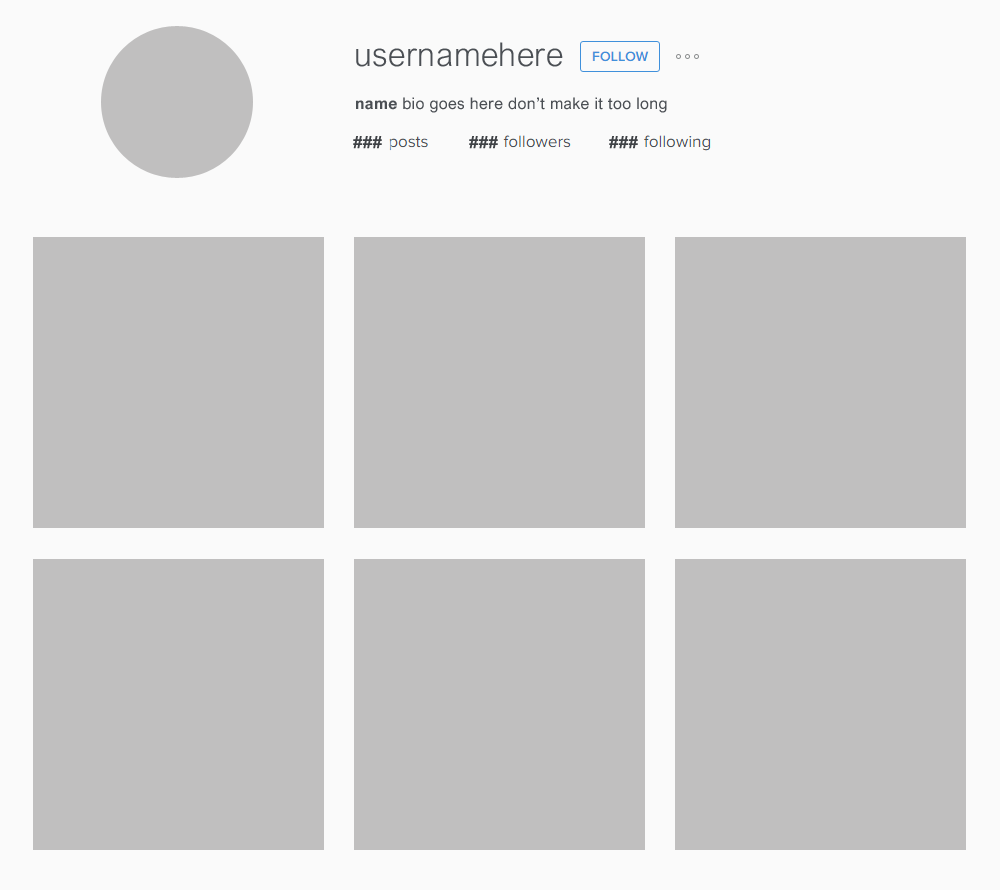
<style>
.page{position:relative;width:1000px;height:890px;background:#c0bfbf}
.page>*{position:absolute;margin:0}
.t1{font:33px "ArialNova-Light";letter-spacing:0.014em;color:#4b4f54}
.t2{font:16px "ArialNova";letter-spacing:0.02em;color:#4b4f54}
.t3{font:16px "ArialNova-Bold";letter-spacing:0.02em;color:#4b4f54}
.t4{font:16.3px "ArialNova-Bold";letter-spacing:0.02em;color:#3f4246;scale:1.04 1}
</style>
<div class="page">
<p class="t1" style="left:356px;top:42px;width:207px;height:25px">usernamehere</p>
<p class="t2" style="left:356px;top:97px;width:311px;height:16px"><span class="t3">name </span>bio goes here don’t make it too long</p>
<p class="t4" style="left:353px;top:136px;width:29px;height:13px">###</p>
<p class="t4" style="left:469px;top:136px;width:29px;height:13px">###</p>
<p class="t4" style="left:609px;top:136px;width:29px;height:13px">###</p>
</div>
